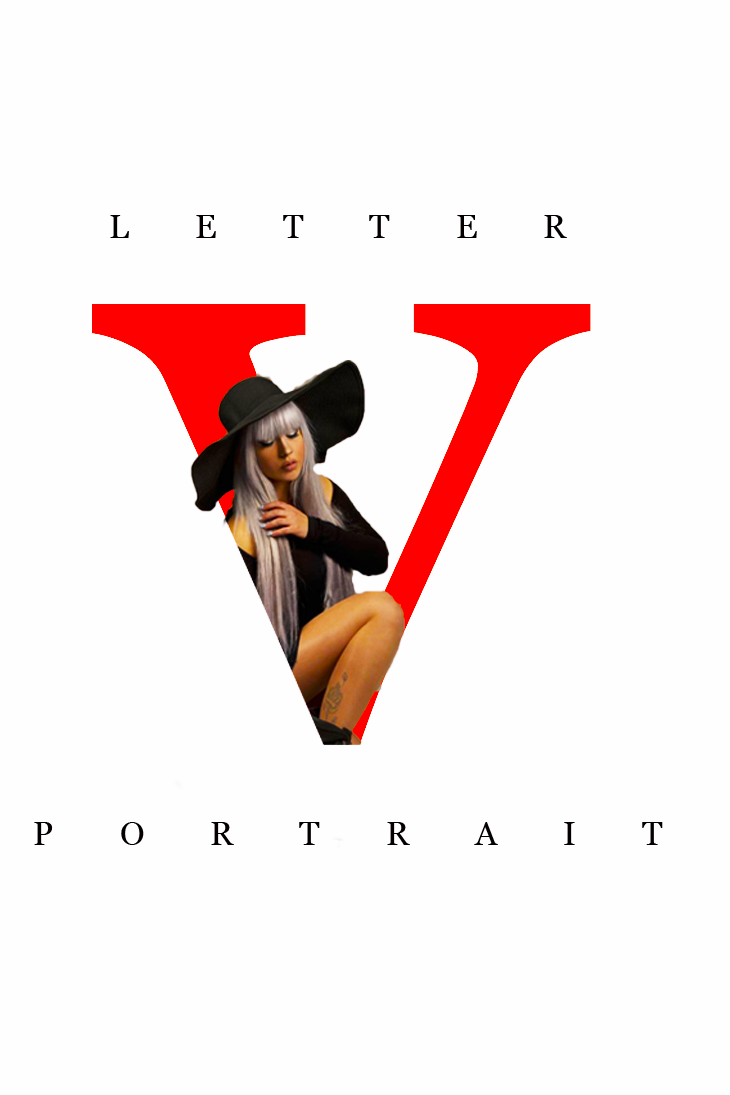
<style>
.page{position:relative;width:730px;height:1095px;background:#fffeff}
.page>*{position:absolute;margin:0}
.t1{font:33px "Georgia";letter-spacing:2em;color:#040000}
.t2{font:902.7px "Georgia";scale:1.06 1}
</style>
<div class="page">
<p class="t1" style="left:110px;top:215px;width:457px;height:23px">LETTER</p>
<p class="t2" style="left:92px;top:304px;width:499px;height:439px">v</p>
<p class="t1" style="left:34px;top:822px;width:629px;height:23px">PORTRAIT</p>
</div>
